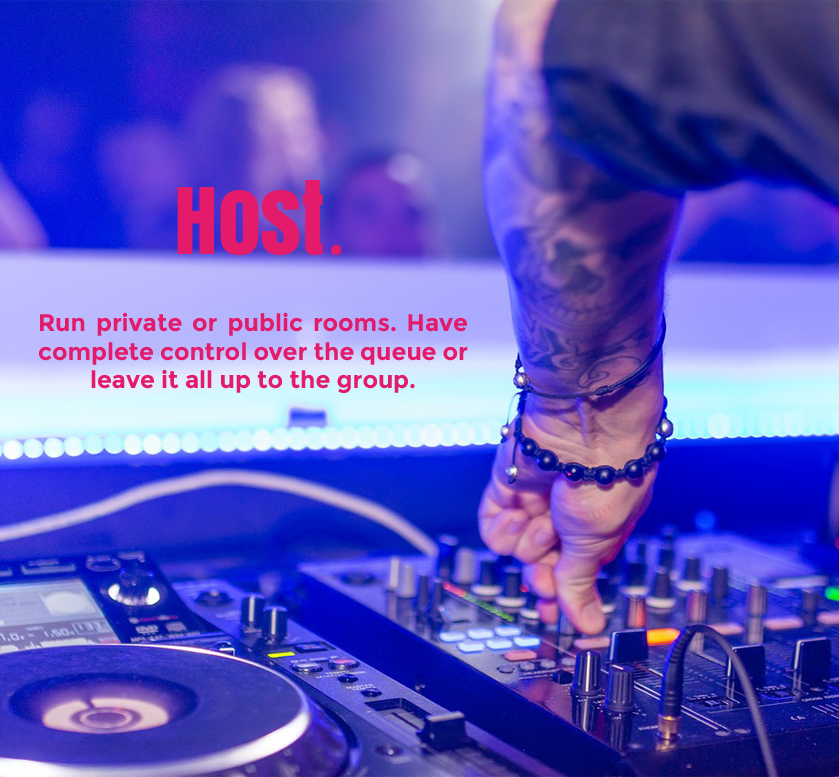
<style>
.page{position:relative;width:839px;height:777px}
.page>*{position:absolute;margin:0}
.t1{font:86px "Anton";color:#e41a6a}
.t2{font:86px "Constantia";color:#e41a6a}
.t3{font:24px "Montserrat-Bold";color:#e41a6a}
</style>
<div class="page">
<p class="t1" style="left:177px;top:180px;width:165px;height:75px">Host<span class="t2">.</span></p>
<p class="t3" style="left:39px;top:312px;width:429px;height:81px;text-align:justify">Run private or public rooms. Have complete control over the queue or leave it all up to the group.</p>
</div>
